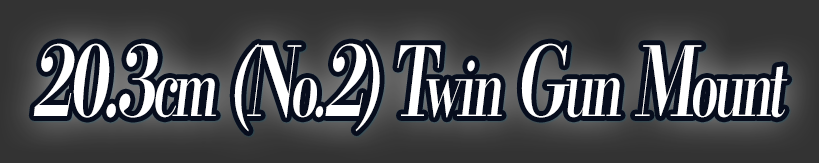
<style>
.page{position:relative;width:819px;height:163px}
.page>*{position:absolute;margin:0}
.t1{font:96px "KochoStd-Heavy";letter-spacing:-0.08em;color:#ffffff;font-style:italic;scale:0.67 1}
.t2{font:76.8px "KochoStd-Heavy";letter-spacing:-0.08em;color:#ffffff;font-style:italic;scale:0.67 1}
</style>
<div class="page">
<p class="t1" style="left:33px;top:43px;width:755px;height:89px">20.3<span class="t2">cm</span> (N<span class="t2">o.</span>2) T<span class="t2">win</span> G<span class="t2">un</span> M<span class="t2">ount</span></p>
</div>
